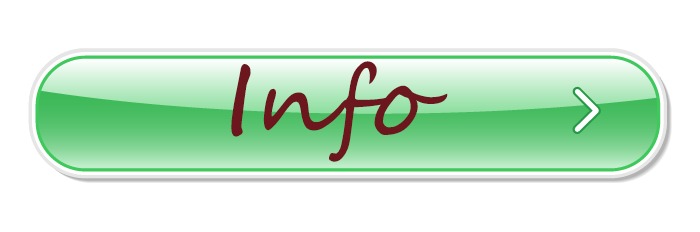
<style>
.page{position:relative;width:700px;height:232px;background:#ffffff}
.page>*{position:absolute;margin:0}
.t1{font:100px "SegoeScript";color:#6b171d}
</style>
<div class="page">
<p class="t1" style="left:231px;top:61px;width:217px;height:101px">Info</p>
</div>
